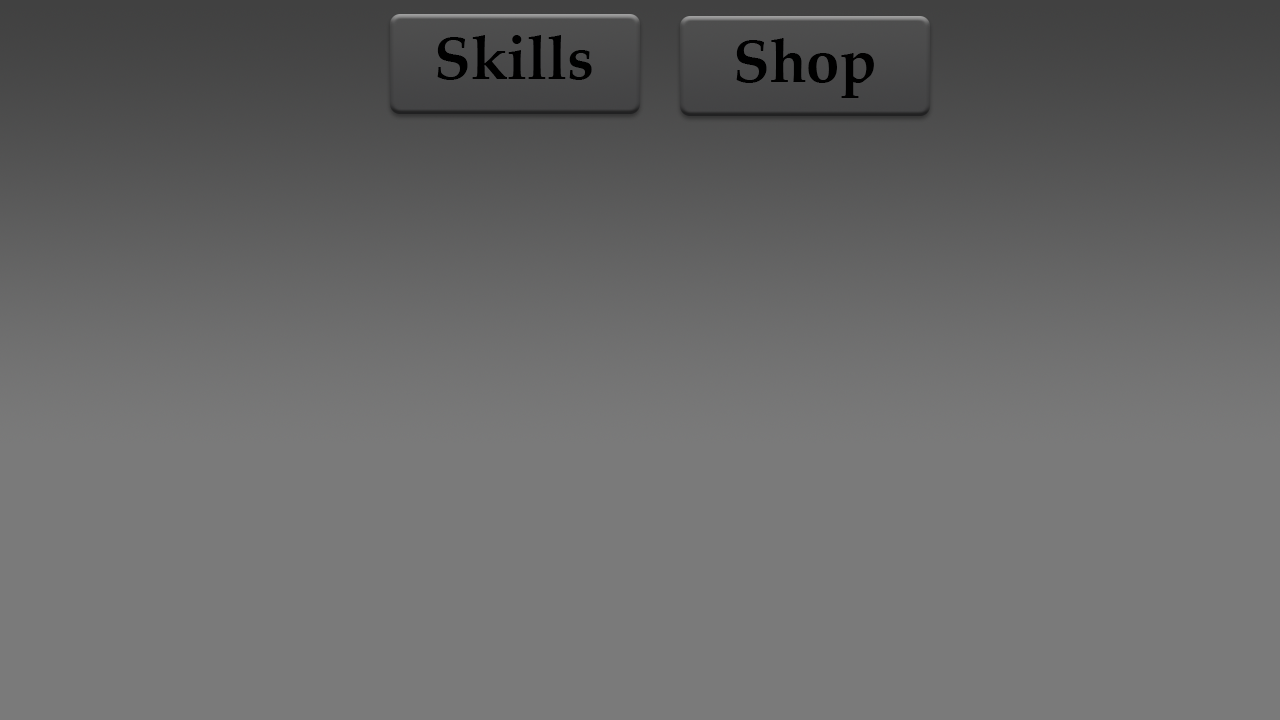
<style>
.page{position:relative;width:1280px;height:720px;background:#7a7a7a}
.page>*{position:absolute;margin:0}
.t1{font:60px "PalatinoLinotype-Bold";color:#000000}
</style>
<div class="page">
<p class="t1" style="left:437px;top:35px;width:155px;height:45px">Skills</p>
<p class="t1" style="left:736px;top:38px;width:138px;height:60px">Shop</p>
</div>
